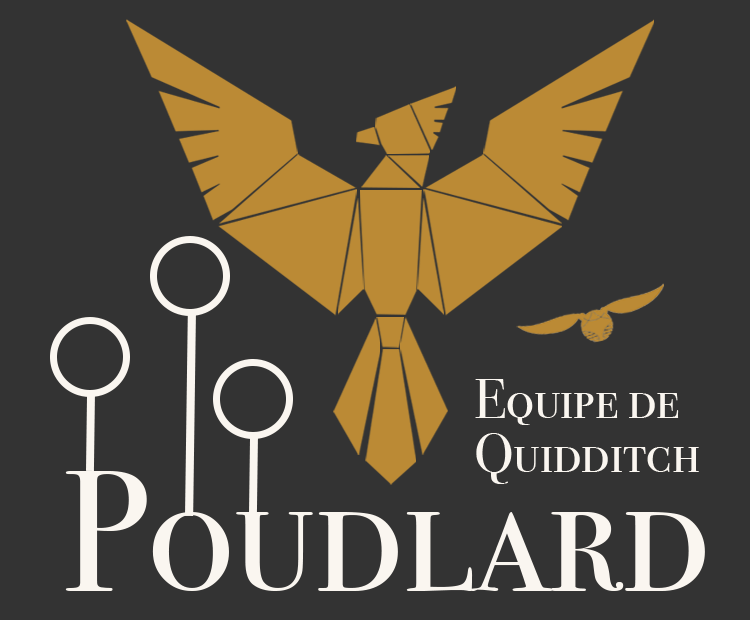
<style>
.page{position:relative;width:750px;height:620px;background:#333333}
.page>*{position:absolute;margin:0}
.t1{font:55px "BodoniSvtyTwoSCITCTT-Book";color:#faf6f0}
.t2{font:169.9px "BodoniSvtyTwoSCITCTT-Book";color:#faf6f0}
</style>
<div class="page">
<p class="t1" style="left:475px;top:379px;width:204px;height:46px">Equipe de</p>
<p class="t1" style="left:476px;top:433px;width:223px;height:51px">Quidditch</p>
<p class="t2" style="left:65px;top:471px;width:640px;height:120px">Poudlard</p>
</div>
